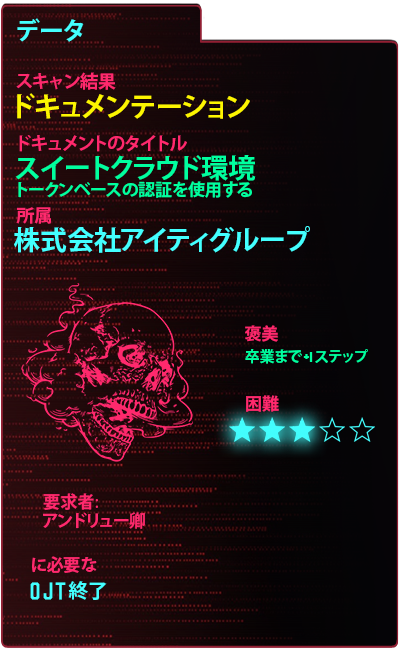
<style>
.page{position:relative;width:400px;height:650px}
.page>*{position:absolute;margin:0}
.t1{font:25px "KozGoPr6N-Bold";color:#43ffff}
.t2{font:18px "KozGoPr6N-Bold";color:#ff296d}
.t3{font:27.5px "KozGoPr6N-Bold";color:#fdf500}
.t4{font:27px "KozGoPr6N-Bold";color:#00ff9f}
.t5{font:17px "KozGoPr6N-Bold";color:#00ff9f}
.t6{font:27px "KozGoPr6N-Bold";color:#43ffff}
.t7{font:17px "KozGoPr6N-Bold";color:#ff296d}
.t8{font:15px "KozGoPr6N-Bold";color:#00ff9f}
.t9{font:15px "Blockletter";color:#00ff9f}
.t10{font:17px "KozGoPr6N-Regular";color:#ff296d}
.t11{font:42px "Party-Lights-[WLM]-Flat";color:#43ffff}
.t12{font:20px "KozGoPr6N-Bold";color:#43ffff}
</style>
<div class="page">
<p class="t1" style="left:17px;top:18px;width:67px;height:24px">データ</p>
<p class="t2" style="left:16px;top:72px;width:100px;height:18px">スキャン結果</p>
<p class="t3" style="left:17px;top:93px;width:233px;height:26px">ドキュメンテーション</p>
<p class="t2" style="left:19px;top:135px;width:168px;height:17px">ドキュメントのタイトル</p>
<p class="t4" style="left:15px;top:155px;width:241px;height:26px">スイートクラウド環境</p>
<p class="t5" style="left:18px;top:181px;width:234px;height:17px">トークンベースの認証を使用する</p>
<p class="t2" style="left:16px;top:207px;width:35px;height:17px">所属</p>
<p class="t6" style="left:14px;top:226px;width:296px;height:27px">株式会社アイティグループ</p>
<p class="t7" style="left:245px;top:325px;width:33px;height:17px">褒美</p>
<p class="t8" style="left:245px;top:349px;width:123px;height:15px">卒業まで<span class="t9"> +1 </span>ステップ</p>
<p class="t7" style="left:246px;top:395px;width:33px;height:17px">困難</p>
<p class="t7" style="left:43px;top:493px;width:55px;height:17px">要求者<span class="t10">:</span></p>
<p class="t7" style="left:43px;top:512px;width:102px;height:17px">アンドリュー卿</p>
<p class="t7" style="left:32px;top:556px;width:65px;height:17px">に必要な</p>
<p class="t11" style="left:30px;top:582px;width:36px;height:18px">OJT</p>
<p class="t12" style="left:68px;top:581px;width:39px;height:19px">終了</p>
</div>
